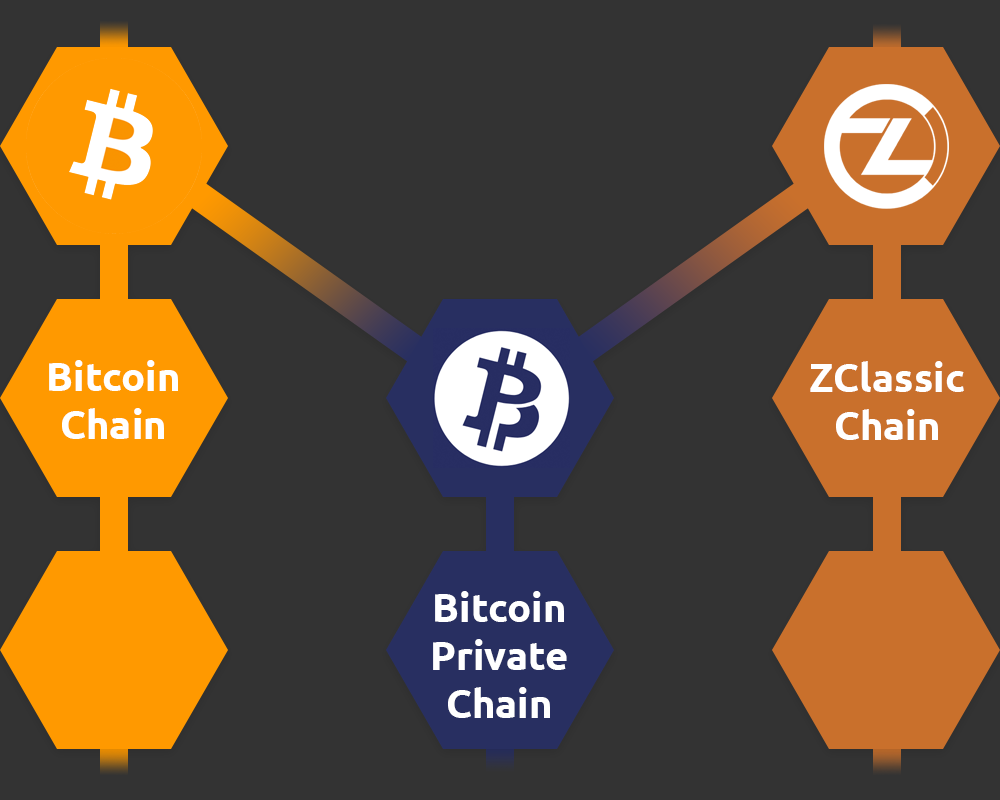
<style>
.page{position:relative;width:1000px;height:800px;background:#333333}
.page>*{position:absolute;margin:0}
.t1{font:40px "Ubuntu-Bold";color:#ffffff}
</style>
<div class="page">
<p class="t1" style="left:49px;top:360px;width:129px;height:79px;text-align:center">Bitcoin<br>Chain</p>
<p class="t1" style="left:810px;top:361px;width:154px;height:79px;text-align:center">ZClassic<br>Chain</p>
<p class="t1" style="left:433px;top:591px;width:134px;height:127px;text-align:center">Bitcoin<br>Private<br>Chain</p>
</div>
